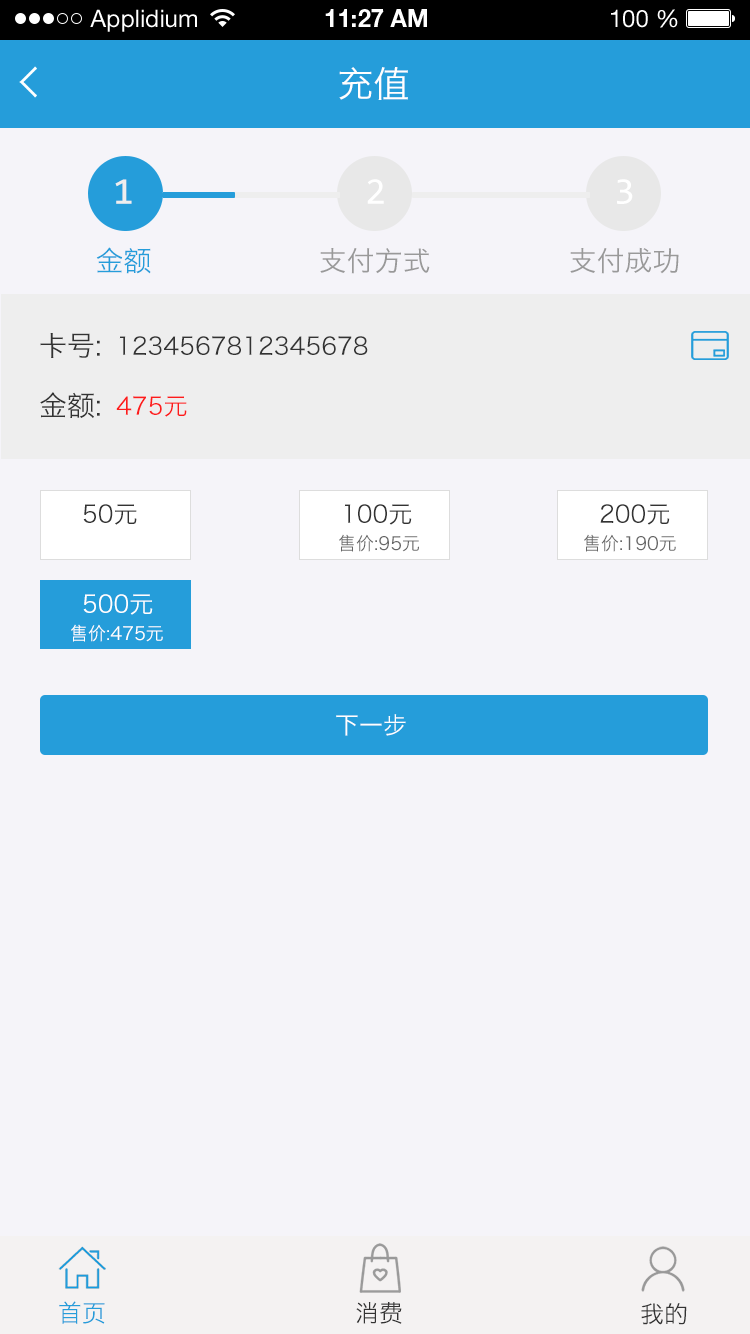
<style>
.page{position:relative;width:750px;height:1334px;background:#f5f4f9}
.page>*{position:absolute;margin:0}
.t1{font:24px "HelveticaNeueLTStd-Roman";color:#ffffff}
.t2{font:24px "HelveticaNeueLTStd-Bd";color:#ffffff}
.t3{font:36px "HiraginoSansGB-W3";color:#ffffff;text-transform:uppercase}
.t4{font:38px "Consolas";color:#eeeeee;text-transform:uppercase}
.t5{font:38px "Consolas";color:#ffffff;text-transform:uppercase}
.t6{font:28px "HiraginoSansGB-W3";color:#259dda;text-transform:uppercase}
.t7{font:28px "HiraginoSansGB-W3";color:#999999;text-transform:uppercase}
.t8{font:28px "HiraginoSansGB-W3";color:#333333;text-transform:uppercase}
.t9{font:24px "HiraginoSansGB-W3";color:#333333;text-transform:uppercase}
.t10{font:24px "HiraginoSansGB-W3";color:#fd1c1c;text-transform:uppercase}
.t11{font:18px "HiraginoSansGB-W3";color:#666666;text-transform:uppercase}
.t12{font:24px "HiraginoSansGB-W3";color:#ffffff;text-transform:uppercase}
.t13{font:18px "HiraginoSansGB-W3";color:#ffffff;text-transform:uppercase}
.t14{font:24px "HiraginoSansGB-W3";color:#259dda;text-transform:uppercase}
</style>
<div class="page">
<p class="t1" style="left:90px;top:9px;width:107px;height:23px">Applidium</p>
<p class="t2" style="left:325px;top:9px;width:102px;height:18px">11:27 AM</p>
<p class="t1" style="left:611px;top:9px;width:67px;height:19px">100 %</p>
<p class="t3" style="left:339px;top:67px;width:69px;height:33px">充值</p>
<p class="t4" style="left:115px;top:179px;width:17px;height:25px">1</p>
<p class="t5" style="left:367px;top:179px;width:17px;height:25px">2</p>
<p class="t5" style="left:617px;top:179px;width:16px;height:25px">3</p>
<p class="t6" style="left:96px;top:247px;width:55px;height:27px">金额</p>
<p class="t7" style="left:320px;top:248px;width:110px;height:26px">支付方式</p>
<p class="t7" style="left:570px;top:247px;width:109px;height:27px">支付成功</p>
<p class="t8" style="left:40px;top:333px;width:60px;height:25px">卡号:</p>
<p class="t9" style="left:119px;top:336px;width:249px;height:19px">1234567812345678</p>
<p class="t8" style="left:40px;top:392px;width:60px;height:26px">金额:</p>
<p class="t10" style="left:116px;top:396px;width:71px;height:21px">475元</p>
<p class="t9" style="left:83px;top:504px;width:54px;height:21px">50元</p>
<p class="t9" style="left:344px;top:504px;width:68px;height:21px">100元</p>
<p class="t9" style="left:600px;top:504px;width:70px;height:21px">200元</p>
<p class="t11" style="left:339px;top:534px;width:80px;height:18px">售价:95元</p>
<p class="t11" style="left:584px;top:534px;width:92px;height:18px">售价:190元</p>
<p class="t12" style="left:83px;top:594px;width:70px;height:21px">500元</p>
<p class="t13" style="left:71px;top:624px;width:92px;height:18px">售价:475元</p>
<p class="t12" style="left:336px;top:714px;width:70px;height:22px">下一步</p>
<p class="t14" style="left:59px;top:1301px;width:46px;height:23px">首页</p>
<p class="t9" style="left:356px;top:1301px;width:46px;height:23px">消费</p>
<p class="t9" style="left:641px;top:1303px;width:46px;height:22px">我的</p>
</div>
